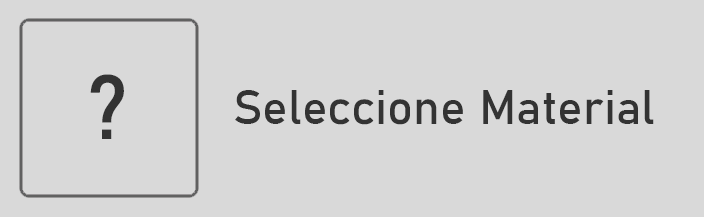
<style>
.page{position:relative;width:704px;height:217px;background:#d9d9d9}
.page>*{position:absolute;margin:0}
.t1{font:90px "Bahnschrift";color:#333333}
.t2{font:48px "Bahnschrift";color:#333333}
.t3{font:30px "Bahnschrift";color:#333333}
</style>
<div class="page">
<p class="t1" style="left:90px;top:74px;width:34px;height:65px">?</p>
<p class="t2" style="left:235px;top:90px;width:419px;height:35px"><span class="t3"><br><br></span>Seleccione Material</p>
</div>
